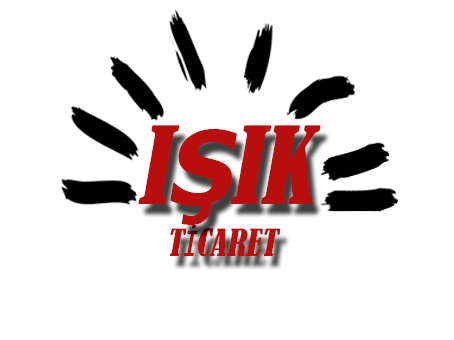
<style>
.page{position:relative;width:454px;height:340px;background:#ffffff}
.page>*{position:absolute;margin:0}
.t1{font:100px "BernardMT-Condensed";color:#b90e0e;font-style:italic}
.t2{font:100px "Tahoma-Bold";color:#b90e0e;font-style:italic}
.t3{font:35px "BernardMT-Condensed";color:#b90e0e;font-style:italic}
.t4{font:35px "Tahoma";color:#b90e0e;font-style:italic}
</style>
<div class="page">
<p class="t1" style="left:138px;top:125px;width:183px;height:100px">I<span class="t2">Ş</span>IK</p>
<p class="t3" style="left:170px;top:225px;width:111px;height:32px">T<span class="t4">İ</span>CARET</p>
</div>
